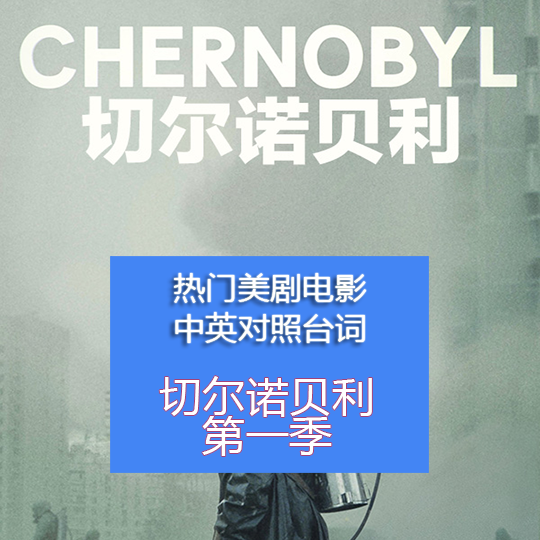
<style>
.page{position:relative;width:540px;height:540px}
.page>*{position:absolute;margin:0}
.t1{font:30.6px/39.1px "MicrosoftYaHei";color:#ffffff;scale:1.06 1}
.t2{font:40.8px/39.1px "MicrosoftYaHei";color:#ffffff;scale:1.06 1}
</style>
<div class="page">
<p class="t1" style="left:174px;top:273px;width:193px;height:70px">热门美剧电影<br>中英对照台词</p>
<p class="t2" style="left:159px;top:376px;width:213px;height:80px;text-align:center">切尔诺贝利<br>第一季</p>
</div>
